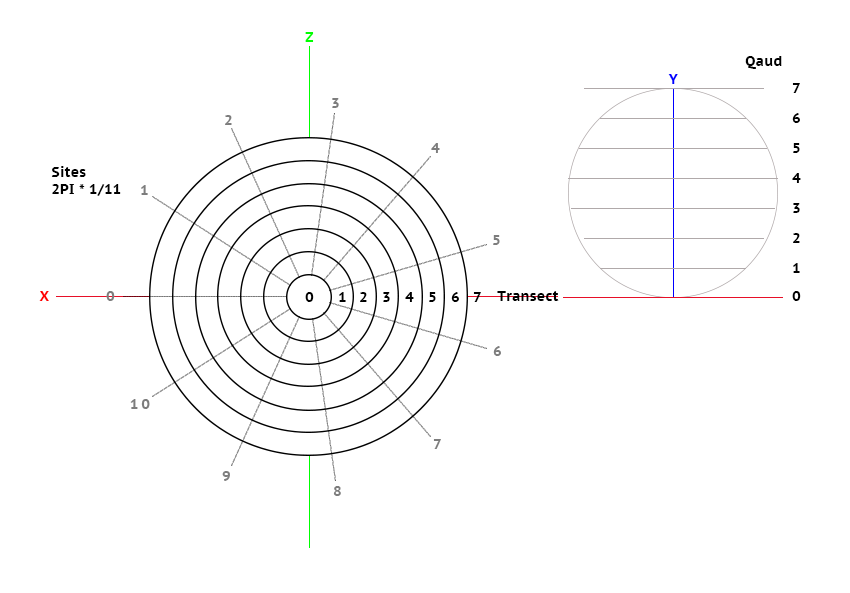
<style>
.page{position:relative;width:850px;height:593px;background:#ffffff}
.page>*{position:absolute;margin:0}
.t1{font:13.9px "PTSans-CaptionBold";letter-spacing:0.24em;color:#00ff00}
.t2{font:13.9px "PTSans-CaptionBold";letter-spacing:0.025em;color:#000000}
.t3{font:13.9px "PTSans-CaptionBold";letter-spacing:0.24em;color:#0000ff}
.t4{font:13.9px "PTSans-CaptionBold";letter-spacing:0.24em;color:#000000}
.t5{font:13.9px "PTSans-CaptionBold";letter-spacing:0.24em;color:#7d7d7d}
.t6{font:13.9px "PTSans-CaptionBold";letter-spacing:0.24em;color:#ff0000}
</style>
<div class="page">
<p class="t1" style="left:305px;top:32px;width:9px;height:10px">Z</p>
<p class="t2" style="left:745px;top:56px;width:37px;height:13px">Qaud</p>
<p class="t3" style="left:668px;top:74px;width:10px;height:10px">Y</p>
<p class="t4" style="left:792px;top:83px;width:8px;height:10px">7</p>
<p class="t5" style="left:332px;top:98px;width:7px;height:10px">3</p>
<p class="t4" style="left:792px;top:113px;width:8px;height:10px">6</p>
<p class="t5" style="left:225px;top:115px;width:7px;height:10px">2</p>
<p class="t5" style="left:431px;top:143px;width:9px;height:10px">4</p>
<p class="t4" style="left:793px;top:143px;width:7px;height:10px">5</p>
<p class="t2" style="left:51px;top:166px;width:35px;height:11px">Sites</p>
<p class="t4" style="left:792px;top:173px;width:9px;height:10px">4</p>
<p class="t2" style="left:52px;top:184px;width:69px;height:12px">2PI * 1/11</p>
<p class="t5" style="left:141px;top:185px;width:7px;height:10px">1</p>
<p class="t4" style="left:793px;top:203px;width:7px;height:10px">3</p>
<p class="t4" style="left:793px;top:233px;width:7px;height:10px">2</p>
<p class="t5" style="left:493px;top:235px;width:7px;height:10px">5</p>
<p class="t4" style="left:793px;top:263px;width:7px;height:10px">1</p>
<p class="t6" style="left:39px;top:291px;width:10px;height:10px">X</p>
<p class="t5" style="left:106px;top:291px;width:9px;height:10px">0</p>
<p class="t4" style="left:305px;top:292px;width:9px;height:10px">0</p>
<p class="t4" style="left:339px;top:292px;width:7px;height:10px">1</p>
<p class="t4" style="left:360px;top:292px;width:7px;height:10px">2</p>
<p class="t4" style="left:383px;top:292px;width:7px;height:10px">3</p>
<p class="t4" style="left:405px;top:292px;width:9px;height:10px">4</p>
<p class="t4" style="left:429px;top:292px;width:7px;height:10px">5</p>
<p class="t4" style="left:451px;top:292px;width:8px;height:10px">6</p>
<p class="t4" style="left:473px;top:292px;width:8px;height:10px">7</p>
<p class="t2" style="left:497px;top:291px;width:62px;height:10px">Transect</p>
<p class="t4" style="left:792px;top:291px;width:9px;height:10px">0</p>
<p class="t5" style="left:493px;top:346px;width:8px;height:10px">6</p>
<p class="t5" style="left:130px;top:399px;width:20px;height:10px">10</p>
<p class="t5" style="left:433px;top:439px;width:8px;height:10px">7</p>
<p class="t5" style="left:222px;top:471px;width:8px;height:10px">9</p>
<p class="t5" style="left:333px;top:486px;width:8px;height:10px">8</p>
</div>
